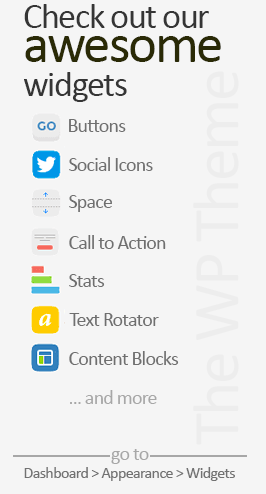
<style>
.page{position:relative;width:266px;height:494px;background:#f5f5f5}
.page>*{position:absolute;margin:0}
.t1{font:36px/34px "Calibri";letter-spacing:-0.04em;color:#353535}
.t2{font:55px/34px "Calibri";letter-spacing:-0.04em;color:#2a2a06}
.t3{font:65.8px "Calibri";letter-spacing:-0.04em;color:#ededed}
.t4{font:20px "Calibri";letter-spacing:-0.04em;color:#6f6f6f}
.t5{font:20px "Calibri";letter-spacing:-0.04em;color:#a7a7a7}
.t6{font:16px "Calibri";letter-spacing:-0.04em;color:#727272}
</style>
<div class="page">
<p class="t1" style="left:24px;top:4px;width:197px;height:98px">Check out our<br><span class="t2">awesome<br></span>widgets</p>
<p class="t3" style="left:193px;top:71px;width:46px;height:374px;rotate:-90deg">The WP Theme</p>
<p class="t4" style="left:69px;top:119px;width:57px;height:13px">Buttons</p>
<p class="t4" style="left:69px;top:157px;width:84px;height:14px">Social Icons</p>
<p class="t4" style="left:69px;top:195px;width:43px;height:17px">Space</p>
<p class="t4" style="left:69px;top:235px;width:97px;height:14px">Call to Action</p>
<p class="t4" style="left:69px;top:274px;width:36px;height:13px">Stats</p>
<p class="t4" style="left:69px;top:313px;width:90px;height:13px">Text Rotator</p>
<p class="t4" style="left:69px;top:351px;width:110px;height:14px">Content Blocks</p>
<p class="t5" style="left:70px;top:390px;width:87px;height:14px">... and more</p>
<p class="t5" style="left:111px;top:449px;width:38px;height:15px">go to</p>
<p class="t6" style="left:24px;top:467px;width:211px;height:14px">Dashboard &gt; Appearance &gt; Widgets</p>
</div>
